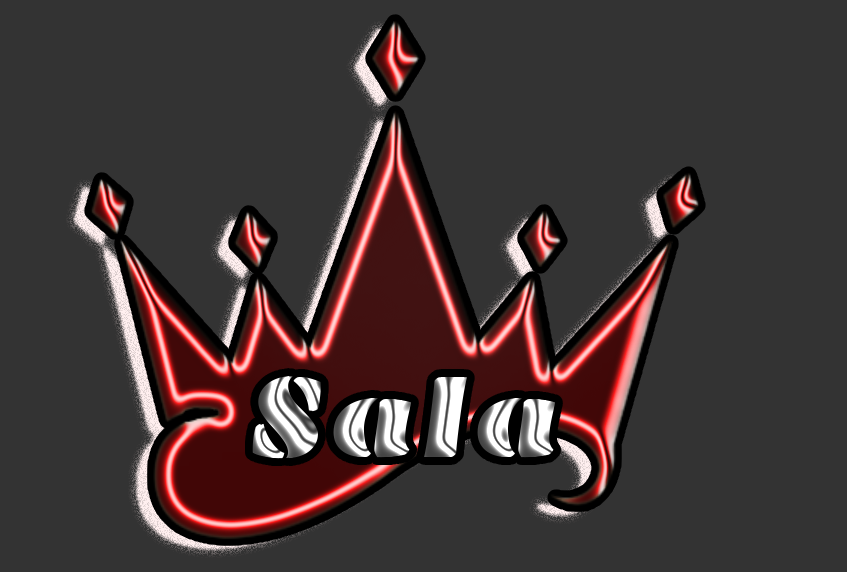
<style>
.page{position:relative;width:847px;height:572px;background:#333333}
.page>*{position:absolute;margin:0}
.t1{font:118px "EmblemaOne-Regular";font-weight:bold}
</style>
<div class="page">
<p class="t1" style="left:252px;top:376px;width:304px;height:83px">Sala</p>
</div>
